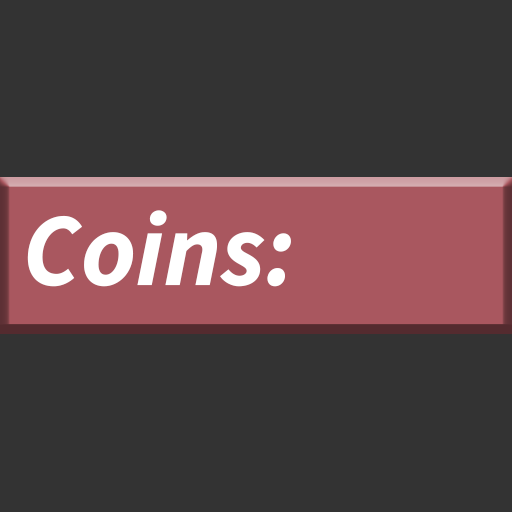
<style>
.page{position:relative;width:512px;height:512px;background:#333333}
.page>*{position:absolute;margin:0}
.t1{font:104px "SourceSansItalic-BoldItalic";color:#ffffff}
</style>
<div class="page">
<p class="t1" style="left:27px;top:210px;width:264px;height:77px">Coins:</p>
</div>
